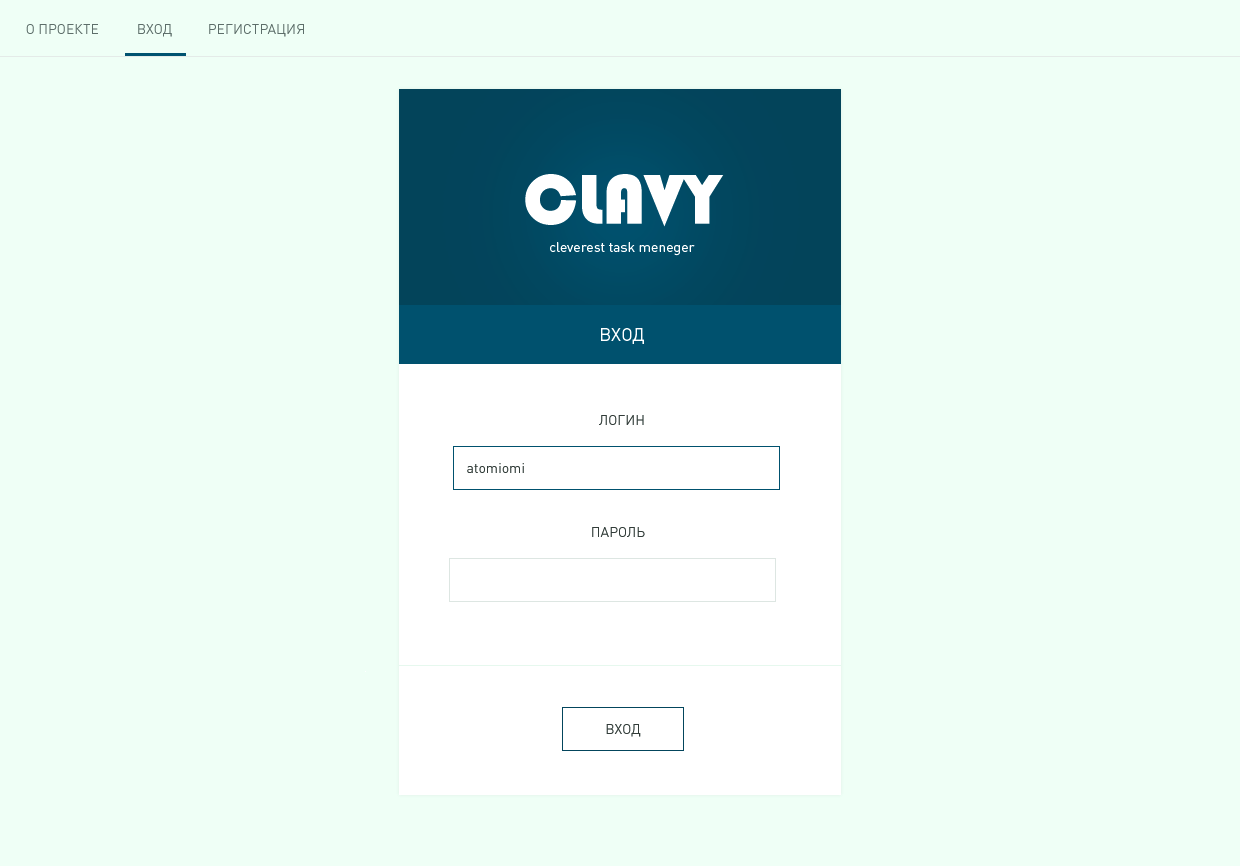
<style>
.page{position:relative;width:1240px;height:866px;background:#effff6}
.page>*{position:absolute;margin:0}
.t1{font:14px "DINPro-Regular";color:#5d6e69}
.t2{font:73px "Bauhaus93";color:#ffffff;text-transform:uppercase}
.t3{font:14px "DINPro-Regular";color:#ffffff}
.t4{font:18px "DINPro-Regular";color:#ffffff}
.t5{font:14px "DINPro-Regular";color:#323c39}
</style>
<div class="page">
<p class="t1" style="left:26px;top:24px;width:72px;height:10px">О ПРОЕКТЕ</p>
<p class="t1" style="left:138px;top:24px;width:34px;height:13px">ВХОД</p>
<p class="t1" style="left:209px;top:24px;width:95px;height:13px">РЕГИСТРАЦИЯ</p>
<p class="t2" style="left:525px;top:174px;width:199px;height:53px">CLAVY</p>
<p class="t3" style="left:550px;top:242px;width:145px;height:14px">cleverest task meneger</p>
<p class="t4" style="left:601px;top:328px;width:43px;height:16px">ВХОД</p>
<p class="t5" style="left:599px;top:415px;width:45px;height:10px">ЛОГИН</p>
<p class="t5" style="left:467px;top:463px;width:57px;height:10px">atomiomi</p>
<p class="t5" style="left:592px;top:527px;width:53px;height:10px">ПАРОЛЬ</p>
<p class="t5" style="left:606px;top:724px;width:35px;height:13px">ВХОД</p>
</div>
